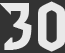
<style>
.page{position:relative;width:65px;height:53px;background:#333333}
.page>*{position:absolute;margin:0}
.t1{font:72px "GWENT-ExtraBold";color:#e9e9e9}
</style>
<div class="page">
<p class="t1" style="left:0px;top:1px;width:66px;height:51px">30</p>
</div>
